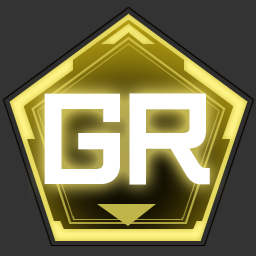
<style>
.page{position:relative;width:256px;height:256px;background:#333333}
.page>*{position:absolute;margin:0}
.t1{font:102.7px "KafuTechnoStd-U";letter-spacing:0.02em;color:#ffffff;scale:0.91 1}
</style>
<div class="page">
<p class="t1" style="left:44px;top:93px;width:166px;height:92px">GR</p>
</div>
